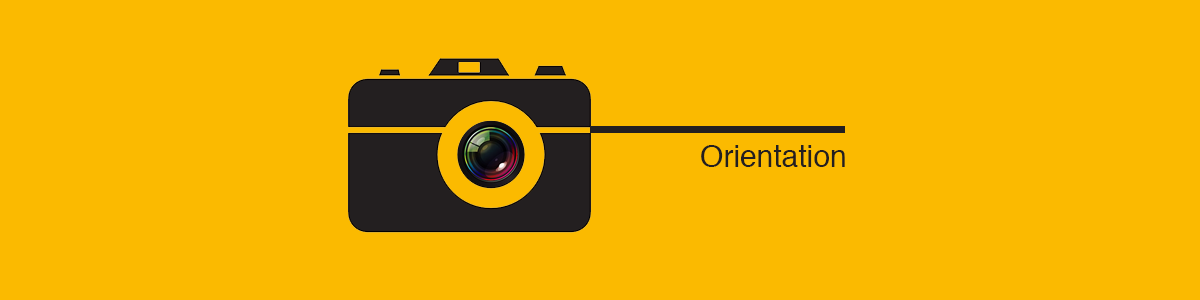
<style>
.page{position:relative;width:1200px;height:300px;background:#fbba00}
.page>*{position:absolute;margin:0}
.t1{font:30px "Helvetica";color:#231f20}
</style>
<div class="page">
<p class="t1" style="left:701px;top:145px;width:144px;height:22px">Orientation</p>
</div>
